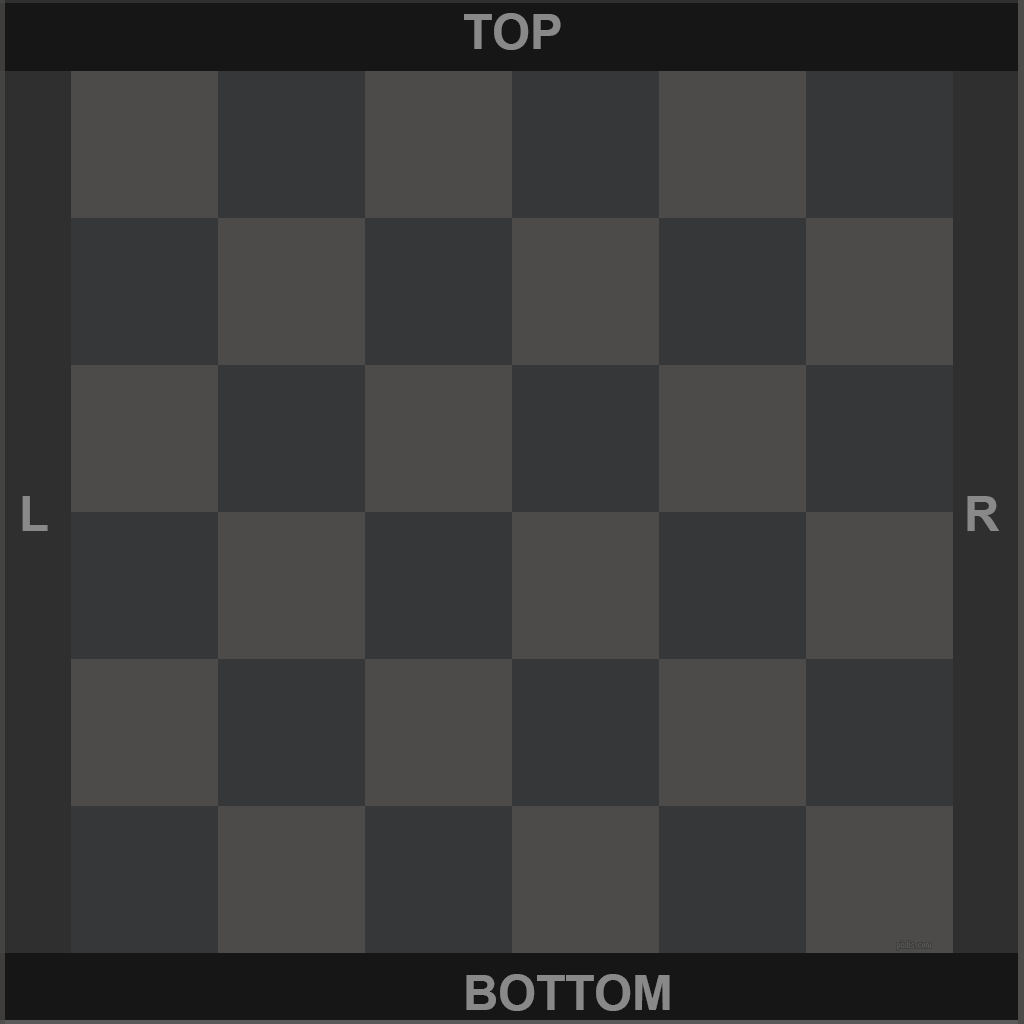
<style>
.page{position:relative;width:1024px;height:1024px;background:#4c4b49}
.page>*{position:absolute;margin:0}
.t1{font:48.6px "Arial-BoldMT";color:#898989}
</style>
<div class="page">
<p class="t1" style="left:464px;top:13px;width:97px;height:37px">TOP</p>
<p class="t1" style="left:22px;top:496px;width:26px;height:35px">L</p>
<p class="t1" style="left:967px;top:496px;width:32px;height:35px">R</p>
<p class="t1" style="left:466px;top:974px;width:204px;height:37px">BOTTOM</p>
</div>
